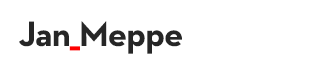
<style>
.page{position:relative;width:334px;height:69px;background:#ffffff}
.page>*{position:absolute;margin:0}
.t1{font:36px "NeutraText-Bold";letter-spacing:-0.025em;color:#262626}
.t2{font:36px "NeutraText-Bold";letter-spacing:-0.025em;color:#fe0000}
</style>
<div class="page">
<p class="t1" style="left:19px;top:21px;width:163px;height:33px">Jan<span class="t2">_</span>Meppe</p>
</div>
